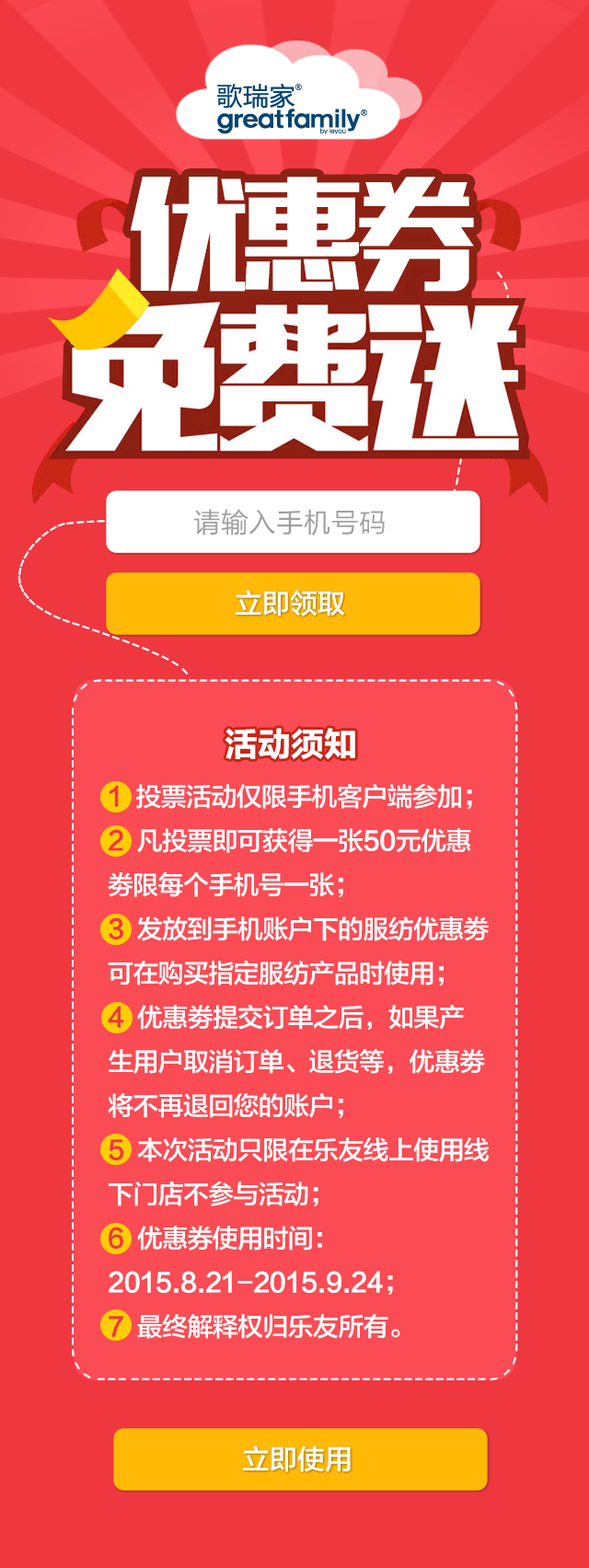
<style>
.page{position:relative;width:589px;height:1568px;background:#ef3740}
.page>*{position:absolute;margin:0}
.t1{font:120.3px "MFLiHei_Noncommercial-Regular";letter-spacing:-0.05em;color:#ffffff}
.t2{font:27.6px "FZLTH_YS_GB2312";color:#a0a0a0}
.t3{font:27.6px "FZLTZHK--GBK1-0";color:#fefdf2}
.t4{font:33.1px "FZLTDHK--GBK1-0";color:#ffffff}
.t5{font:25.8px/44.2px "FZLTZHK--GBK1-0";letter-spacing:-0.025em;color:#ffffff}
.t6{font:25.8px/44.2px "FZLTZHK--GBK1-0";letter-spacing:-0.025em;color:#ef3740}
</style>
<div class="page">
<p class="t1" style="left:131px;top:177px;width:343px;height:115px">优惠券</p>
<p class="t2" style="left:194px;top:509px;width:191px;height:27px">请输入手机号码</p>
<p class="t3" style="left:236px;top:590px;width:109px;height:27px">立即领取</p>
<p class="t4" style="left:225px;top:728px;width:130px;height:32px">活动须知</p>
<p class="t5" style="left:108px;top:784px;width:381px;height:555px"><span class="t6">1</span>  投票活动仅限手机客户端参加；<br><span class="t6">2 </span> 凡投票即可获得一张50元优惠<br>劵限每个手机号一张；<br><span class="t6">3</span>  发放到手机账户下的服纺优惠劵<br>可在购买指定服纺产品时使用；<br><span class="t6">4 </span> 优惠劵提交订单之后，如果产<br>生用户取消订单、退货等，优惠劵将不再退回您的账户；<br><span class="t6">5</span>  本次活动只限在乐友线上使用线下门店不参与活动；<br><span class="t6">6</span>  优惠券使用时间：2015.8.21-2015.9.24；<br><span class="t6">7</span>  最终解释权归乐友所有。</p>
<p class="t3" style="left:243px;top:1446px;width:108px;height:26px">立即使用</p>
</div>
